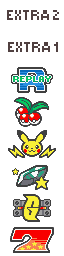
<style>
.page{position:relative;width:64px;height:256px;background:#ffffff}
.page>*{position:absolute;margin:0}
.t1{font:14px "Small Fonts";color:#504040}
</style>
<div class="page">
<p class="t1" style="left:7px;top:10px;width:52px;height:10px">EXTRA 2</p>
<p class="t1" style="left:8px;top:42px;width:50px;height:10px">EXTRA 1</p>
</div>
